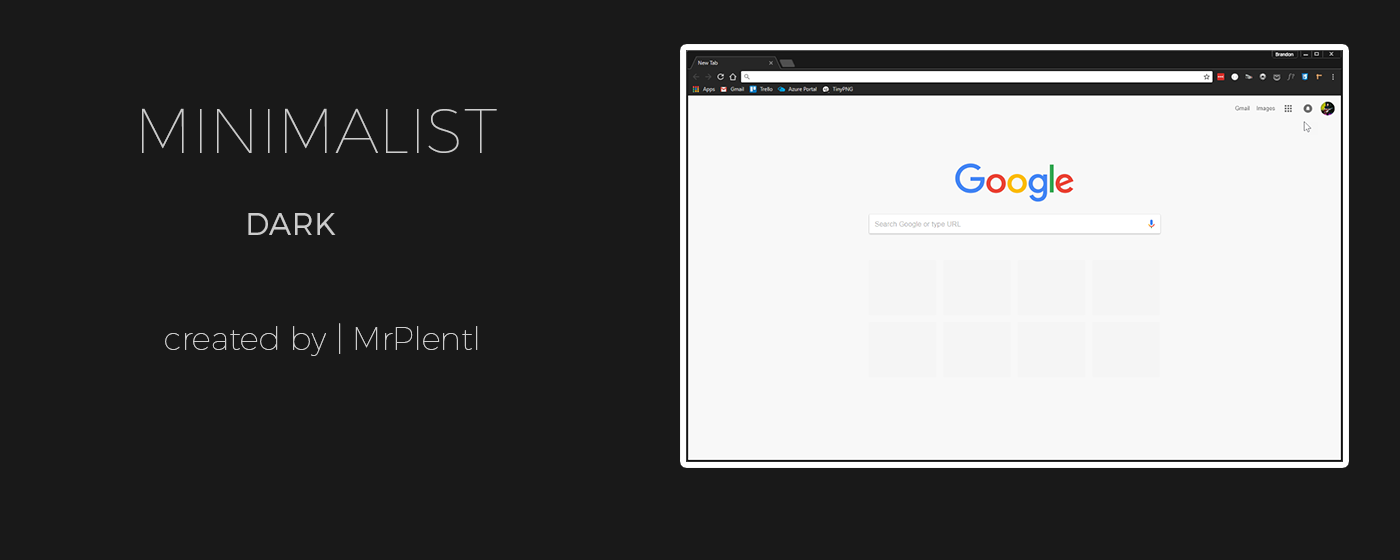
<style>
.page{position:relative;width:1400px;height:560px;background:#191919}
.page>*{position:absolute;margin:0}
.t1{font:63px "Montserrat-Hairline";color:#cccccc}
.t2{font:31px "Montserrat-Light";color:#cccccc}
.t3{font:32px "Montserrat-Hairline";color:#cccccc}
</style>
<div class="page">
<p class="t1" style="left:142px;top:108px;width:355px;height:45px">MINIMALIST</p>
<p class="t2" style="left:248px;top:213px;width:88px;height:22px">DARK</p>
<p class="t3" style="left:165px;top:323px;width:313px;height:33px">created by | MrPlentl</p>
</div>
